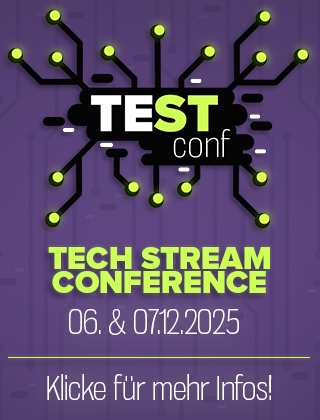
<style>
.page{position:relative;width:320px;height:420px}
.page>*{position:absolute;margin:0}
.t1{font:32px/24px "ProximaNova-Black";color:#ccff57}
.t2{font:33.3px "GnuolaneXl-Regular";color:#ffffff}
.t3{font:32px "GnuolaneXl-Regular";color:#ffffff}
</style>
<div class="page">
<p class="t1" style="left:48px;top:247px;width:222px;height:46px;text-align:center">TECH STREAM<br>CONFERENCE</p>
<p class="t2" style="left:69px;top:309px;width:170px;height:26px">06. &amp; 07.12.2025</p>
<p class="t3" style="left:47px;top:374px;width:225px;height:26px">Klicke für mehr Infos!</p>
</div>
